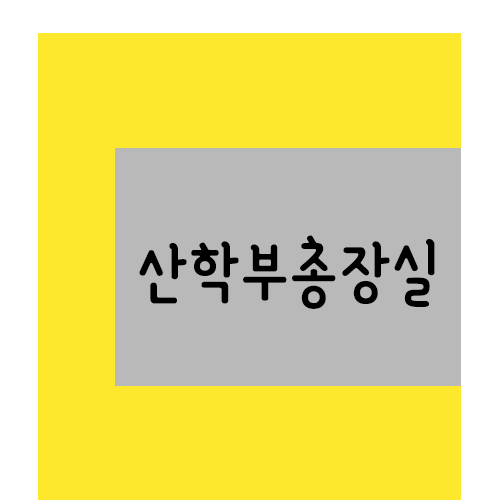
<style>
.page{position:relative;width:500px;height:500px;background:#fee82d}
.page>*{position:absolute;margin:0}
.t1{font:80px "YanoljaYacheR";color:#000000}
</style>
<div class="page">
<p class="t1" style="left:139px;top:235px;width:296px;height:74px">산학부총장실</p>
</div>
